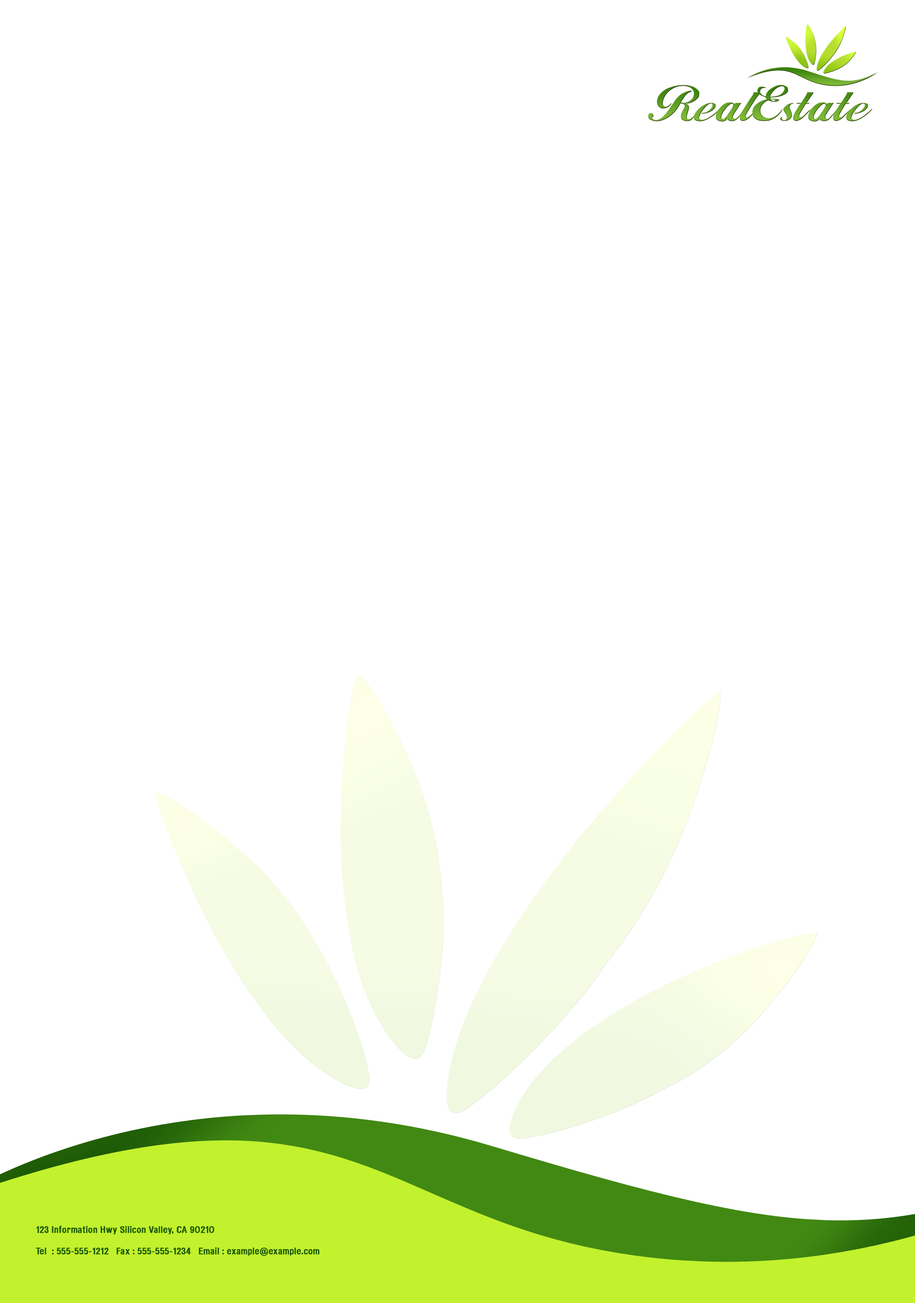
<style>
.page{position:relative;width:915px;height:1303px;background:#ffffff}
.page>*{position:absolute;margin:0}
.t1{font:47.7px "Hancock";letter-spacing:-0.015em}
.t2{font:9.2px/21.6px "HeadacheNormal";letter-spacing:0.01em;color:#1e5b06;font-weight:bold}
</style>
<div class="page">
<p class="t1" style="left:648px;top:85px;width:224px;height:37px">RealEstate</p>
<p class="t2" style="left:36px;top:1226px;width:283px;height:30px">123 Information Hwy Silicon Valley, CA 90210   <br>Tel  : 555-555-1212   Fax : 555-555-1234   Email : example@example.com</p>
</div>
